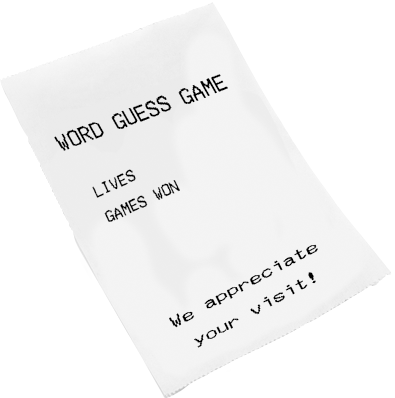
<style>
.page{position:relative;width:395px;height:398px;background:#ffffff}
.page>*{position:absolute;margin:0}
.t1{font:32.7px "MerchantCopyWide";color:#000000;scale:0.52 1}
.t2{font:23.2px "MerchantCopy";color:#000000;scale:1.08 1}
.t3{font:22.7px "MerchantCopyWide";color:#000000;scale:0.8 1}
</style>
<div class="page">
<p class="t1" style="left:54px;top:74px;width:174px;height:77px;rotate:-21deg">WORD GUESS GAME</p>
<p class="t2" style="left:92px;top:169px;width:88px;height:53px;rotate:-25deg">LIVES<br>GAMES WON</p>
<p class="t3" style="left:169px;top:244px;width:149px;height:104px;text-align:center;rotate:-28deg">We appreciate<br>your visit!</p>
</div>
